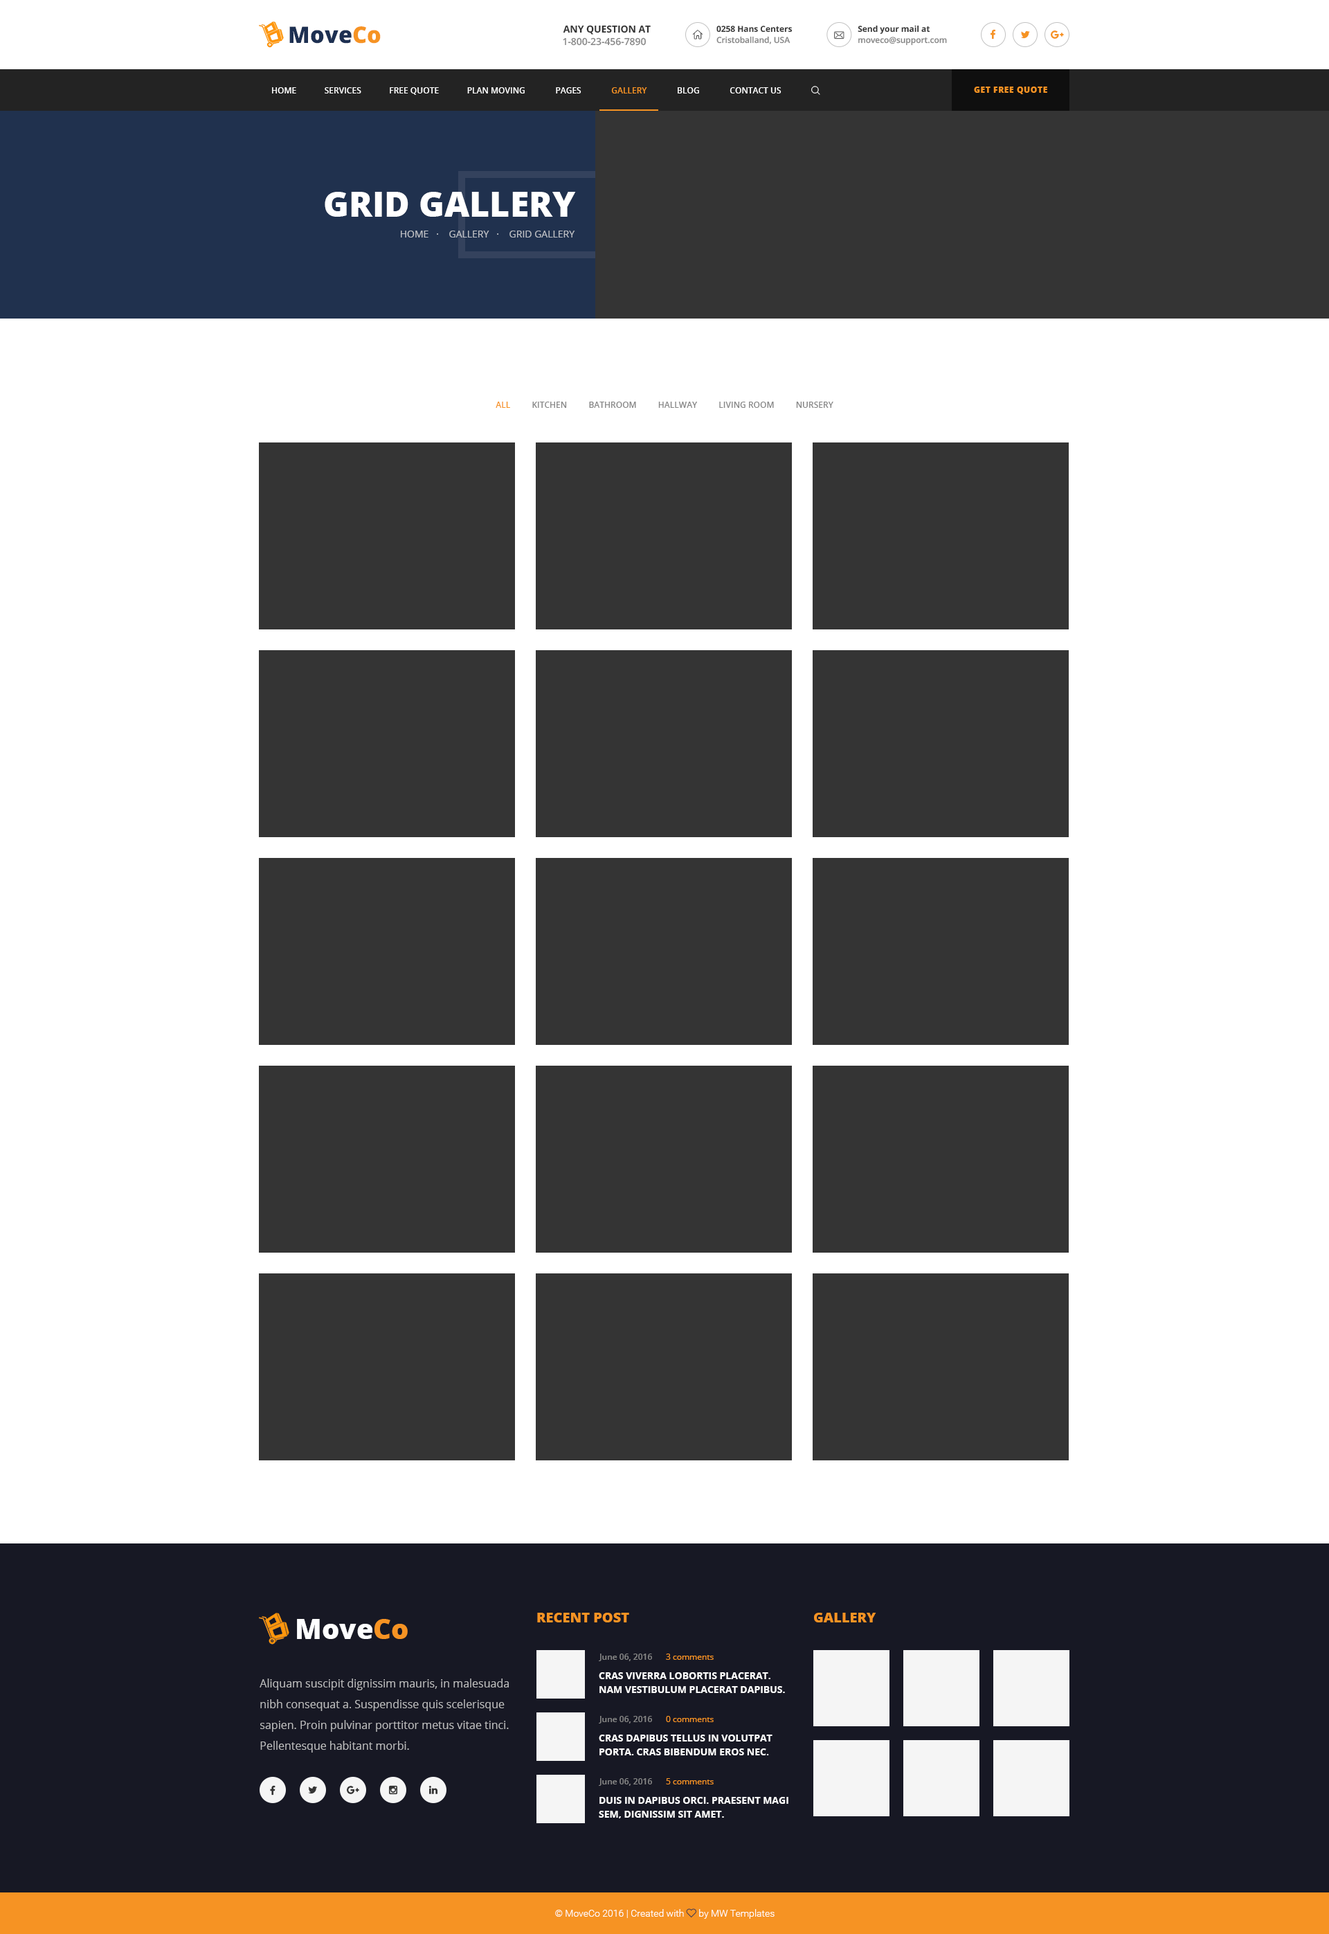
<style>
.page{position:relative;width:1329px;height:1934px;background:#ffffff}
.page>*{position:absolute;margin:0}
.t1{font:22.9px "OpenSans-Extrabold";color:#1d3052}
.t2{font:22.9px "OpenSans-Extrabold";color:#f69323}
.t3{font:9.7px "OpenSans-Bold";color:#343434;text-transform:uppercase}
.t4{font:8.3px "OpenSans-Bold";color:#343434}
.t5{font:9.7px "OpenSans-Semibold";color:#868686}
.t6{font:8.3px "OpenSans-Semibold";color:#868686}
.t7{font:8.3px "OpenSans-Extrabold";letter-spacing:0.05em;color:#f69323;text-transform:uppercase}
.t8{font:34.6px "OpenSans-Extrabold";color:#ffffff;text-transform:uppercase}
.t9{font:9.7px "OpenSans";color:#bcbfc5;text-transform:uppercase}
.t10{font:8.3px "OpenSans-Semibold";color:#868686;text-transform:uppercase}
.t11{font:8.3px "OpenSans-Semibold";color:#f69323;text-transform:uppercase}
.t12{font:13.8px "OpenSans-Extrabold";color:#f69323;text-transform:uppercase}
.t13{font:27.7px "OpenSans-Extrabold";color:#fefeff}
.t14{font:27.7px "OpenSans-Extrabold";color:#f69323}
.t15{font:8.3px "OpenSans";color:#f69323}
.t16{font:9.7px/13.8px "OpenSans-Bold";color:#ffffff;text-transform:uppercase}
.t17{font:11.1px/20.8px "OpenSans";color:#bbbbbc}
</style>
<div class="page">
<p class="t1" style="left:289px;top:26px;width:92px;height:18px">Move<span class="t2">Co</span></p>
<p class="t3" style="left:563px;top:25px;width:88px;height:10px">Any Question at</p>
<p class="t4" style="left:717px;top:26px;width:75px;height:7px">0258 Hans Centers</p>
<p class="t4" style="left:858px;top:25px;width:72px;height:9px">Send your mail at</p>
<p class="t5" style="left:563px;top:37px;width:83px;height:9px">1-800-23-456-7890</p>
<p class="t6" style="left:717px;top:36px;width:74px;height:8px">Cristoballand, USA</p>
<p class="t6" style="left:858px;top:37px;width:89px;height:9px">moveco@support.com</p>
<p class="t7" style="left:974px;top:87px;width:73px;height:7px">Get Free Quote</p>
<p class="t8" style="left:325px;top:192px;width:251px;height:25px">Grid Gallery</p>
<p class="t9" style="left:401px;top:231px;width:174px;height:6px">home   ·    Gallery   ·    Grid Gallery</p>
<p class="t10" style="left:496px;top:402px;width:338px;height:6px"><span class="t11">all</span>          KITCHEN          BATHROOM          hallway          living room          nursery</p>
<p class="t12" style="left:537px;top:1612px;width:92px;height:10px">recent post</p>
<p class="t12" style="left:814px;top:1612px;width:62px;height:10px">Gallery</p>
<p class="t13" style="left:297px;top:1619px;width:111px;height:20px">Move<span class="t14">Co</span></p>
<p class="t6" style="left:599px;top:1653px;width:53px;height:8px">June 06, 2016</p>
<p class="t15" style="left:666px;top:1653px;width:48px;height:6px">3 comments</p>
<p class="t16" style="left:599px;top:1672px;width:186px;height:21px">Cras viverra lobortis placerat. Nam vestibulum placerat dapibus.</p>
<p class="t17" style="left:260px;top:1678px;width:249px;height:74px">Aliquam suscipit dignissim mauris, in malesuada nibh consequat a. Suspendisse quis scelerisque sapien. Proin pulvinar porttitor metus vitae tinci. Pellentesque habitant morbi.</p>
<p class="t6" style="left:599px;top:1716px;width:53px;height:7px">June 06, 2016</p>
<p class="t15" style="left:666px;top:1716px;width:48px;height:6px">0 comments</p>
<p class="t16" style="left:599px;top:1734px;width:174px;height:21px">Cras dapibus tellus in volutpat porta. Cras bibendum eros nec.</p>
<p class="t6" style="left:599px;top:1778px;width:53px;height:7px">June 06, 2016</p>
<p class="t15" style="left:666px;top:1778px;width:48px;height:6px">5 comments</p>
<p class="t16" style="left:599px;top:1797px;width:190px;height:21px">Duis in dapibus orci. Praesent magi sem, dignissim sit amet.</p>
</div>
